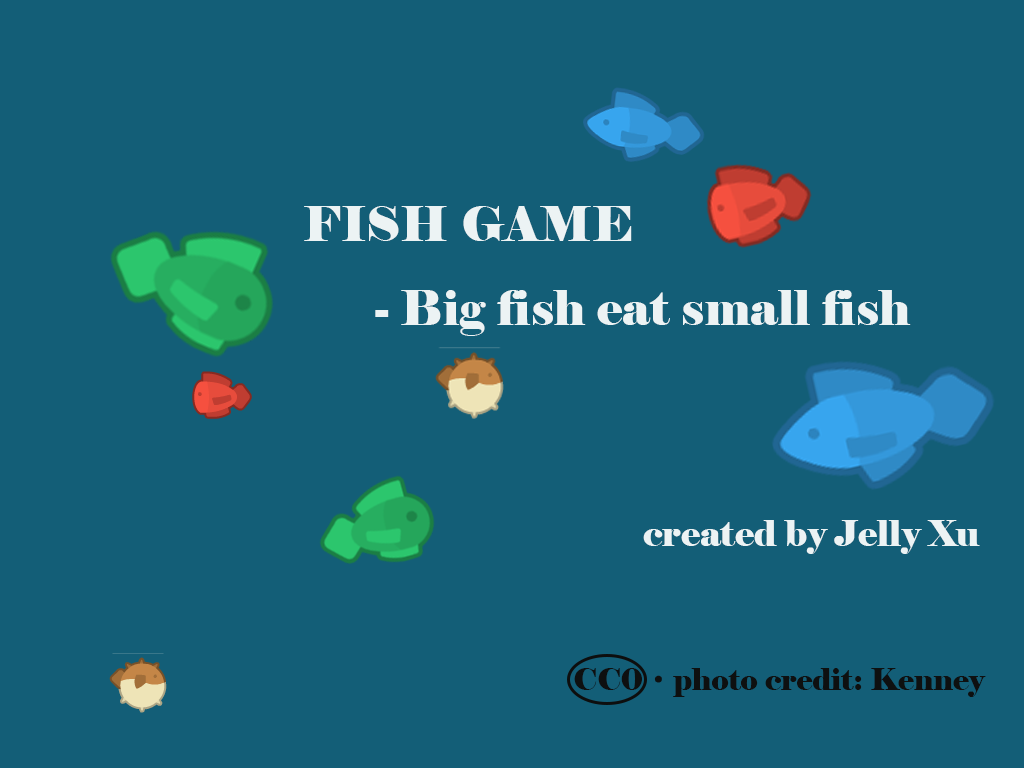
<style>
.page{position:relative;width:1024px;height:768px;background:#135e77}
.page>*{position:absolute;margin:0}
.t1{font:48px "Elephant-Regular";color:#ecf3f4}
.t2{font:36px "Elephant-Regular";color:#ecf3f4}
.t3{font:30px "Elephant-Regular";color:#0e1010}
.t4{font:30px "SimSun";color:#0e1010}
</style>
<div class="page">
<p class="t1" style="left:304px;top:206px;width:607px;height:130px">FISH GAME<br>      - Big fish eat small fish</p>
<p class="t2" style="left:643px;top:520px;width:337px;height:34px">created by Jelly Xu</p>
<p class="t3" style="left:574px;top:668px;width:412px;height:29px">CC0<span class="t4">·</span>photo credit: Kenney</p>
</div>
